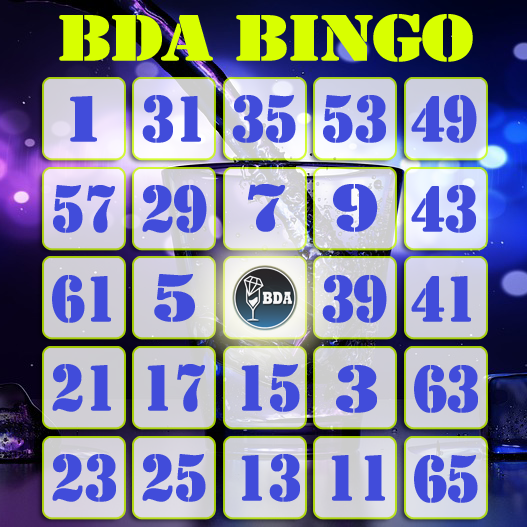
<style>
.page{position:relative;width:527px;height:527px}
.page>*{position:absolute;margin:0}
.t1{font:60px "StencilStd";letter-spacing:-0.04em;color:#d8ff00;text-transform:uppercase;font-weight:bold;scale:1.2 1}
.t2{font:60px "StencilStd";letter-spacing:-0.04em;color:#414cda;text-transform:uppercase;font-weight:bold;scale:1.2 1}
.t3{font:60px "StencilStd";letter-spacing:-0.04em;color:#414cda;text-transform:uppercase;font-weight:bold;scale:0.9 1}
</style>
<div class="page">
<p class="t1" style="left:59px;top:14px;width:414px;height:48px">BDA BINGO</p>
<p class="t2" style="left:70px;top:96px;width:27px;height:46px">1</p>
<p class="t3" style="left:142px;top:95px;width:59px;height:48px">31</p>
<p class="t3" style="left:232px;top:95px;width:64px;height:48px">35</p>
<p class="t3" style="left:323px;top:95px;width:63px;height:48px">53</p>
<p class="t3" style="left:411px;top:95px;width:66px;height:48px">49</p>
<p class="t3" style="left:53px;top:185px;width:62px;height:48px">57</p>
<p class="t3" style="left:142px;top:185px;width:65px;height:48px">29</p>
<p class="t2" style="left:248px;top:184px;width:37px;height:48px">7</p>
<p class="t2" style="left:333px;top:184px;width:45px;height:48px">9</p>
<p class="t3" style="left:411px;top:185px;width:65px;height:48px">43</p>
<p class="t3" style="left:52px;top:275px;width:59px;height:48px">61</p>
<p class="t2" style="left:154px;top:274px;width:41px;height:48px">5</p>
<p class="t3" style="left:322px;top:275px;width:65px;height:48px">39</p>
<p class="t3" style="left:411px;top:276px;width:60px;height:46px">41</p>
<p class="t3" style="left:52px;top:364px;width:59px;height:48px">21</p>
<p class="t3" style="left:147px;top:364px;width:58px;height:48px">17</p>
<p class="t3" style="left:241px;top:364px;width:59px;height:48px">15</p>
<p class="t2" style="left:336px;top:365px;width:41px;height:48px">3</p>
<p class="t3" style="left:414px;top:365px;width:64px;height:48px">63</p>
<p class="t3" style="left:52px;top:454px;width:64px;height:48px">23</p>
<p class="t3" style="left:142px;top:454px;width:64px;height:48px">25</p>
<p class="t3" style="left:241px;top:454px;width:59px;height:48px">13</p>
<p class="t3" style="left:331px;top:455px;width:54px;height:46px">11</p>
<p class="t3" style="left:414px;top:455px;width:64px;height:48px">65</p>
</div>
